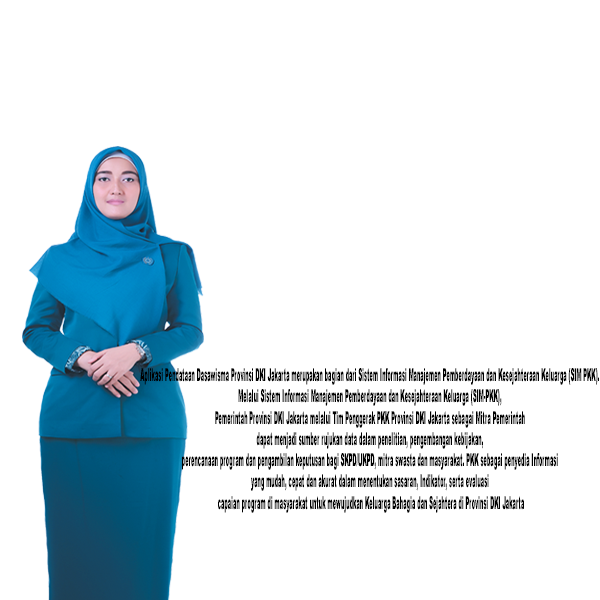
<style>
.page{position:relative;width:600px;height:600px;background:#ffffff}
.page>*{position:absolute;margin:0}
.t1{font:17.7px "Arial-Black";color:#000000;scale:0.29 1}
</style>
<div class="page">
<p class="t1" style="left:140px;top:368px;width:459px;height:145px;text-align:center">Aplikasi Pendataan Dasawisma Provinsi DKI Jakarta merupakan bagian dari Sistem Informasi Manajemen Pemberdayaan dan Kesejahteraan Keluarga (SIM PKK). <br>Melalui Sistem Informasi Manajemen Pemberdayaan dan Kesejahteraan Keluarga (SIM-PKK), <br>Pemerintah Provinsi DKI Jakarta melalui Tim Penggerak PKK Provinsi DKI Jakarta sebagai Mitra Pemerintah <br>dapat menjadi sumber rujukan data dalam penelitian, pengembangan kebijakan, <br>perencanaan program dan pengambilan keputusan bagi SKPD/UKPD, mitra swasta dan masyarakat. PKK sebagai penyedia Informasi <br>yang mudah, cepat dan akurat dalam menentukan sasaran, Indikator, serta evaluasi <br>capaian program di masyarakat untuk mewujudkan Keluarga Bahagia dan Sejahtera di Provinsi DKI Jakarta</p>
</div>
